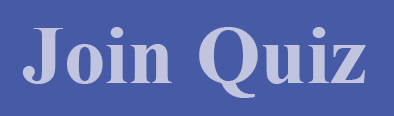
<style>
.page{position:relative;width:394px;height:116px;background:#465aa5}
.page>*{position:absolute;margin:0}
.t1{font:83.3px "TimesNewRomanPS-BoldMT";color:#c0c4de}
</style>
<div class="page">
<p class="t1" style="left:22px;top:27px;width:344px;height:71px">Join Quiz</p>
</div>
